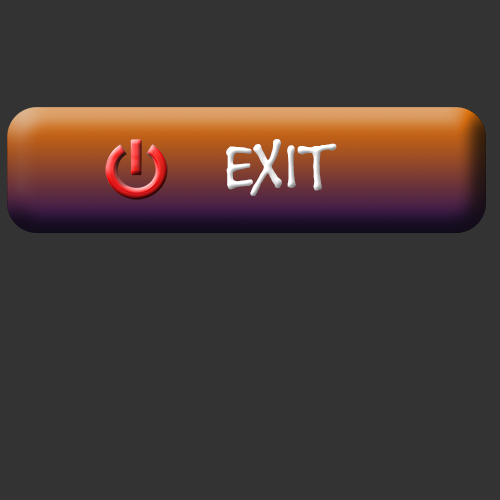
<style>
.page{position:relative;width:500px;height:500px;background:#333333}
.page>*{position:absolute;margin:0}
.t1{font:70.6px "BuxtonSketch"}
.t2{font:52.9px "CopperplateGothic-Light"}
</style>
<div class="page">
<p class="t1" style="left:226px;top:139px;width:111px;height:57px"><span class="t2">              </span>EXIT</p>
</div>
